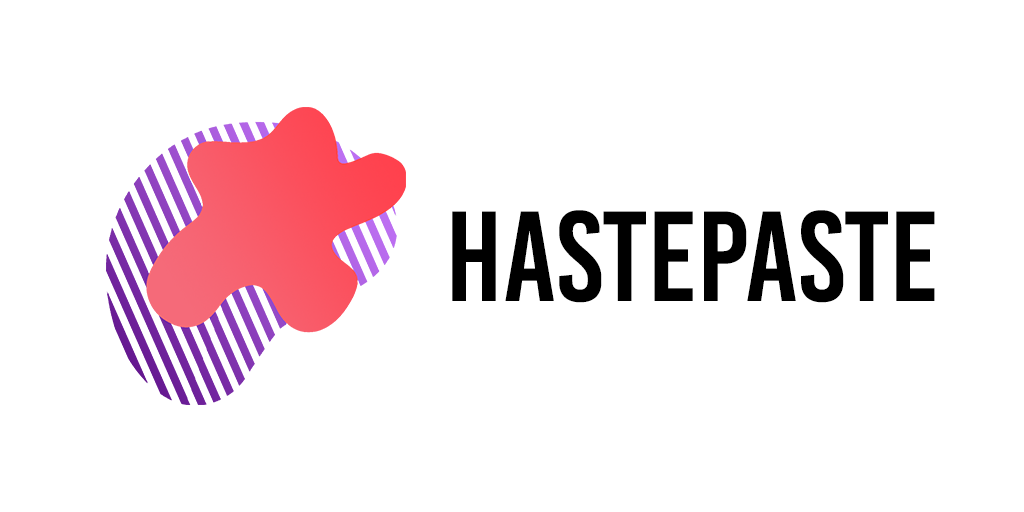
<style>
.page{position:relative;width:1024px;height:512px;background:#ffffff}
.page>*{position:absolute;margin:0}
.t1{font:128px "BebasKai";color:#000000}
</style>
<div class="page">
<p class="t1" style="left:452px;top:210px;width:483px;height:93px">hastepaste</p>
</div>
